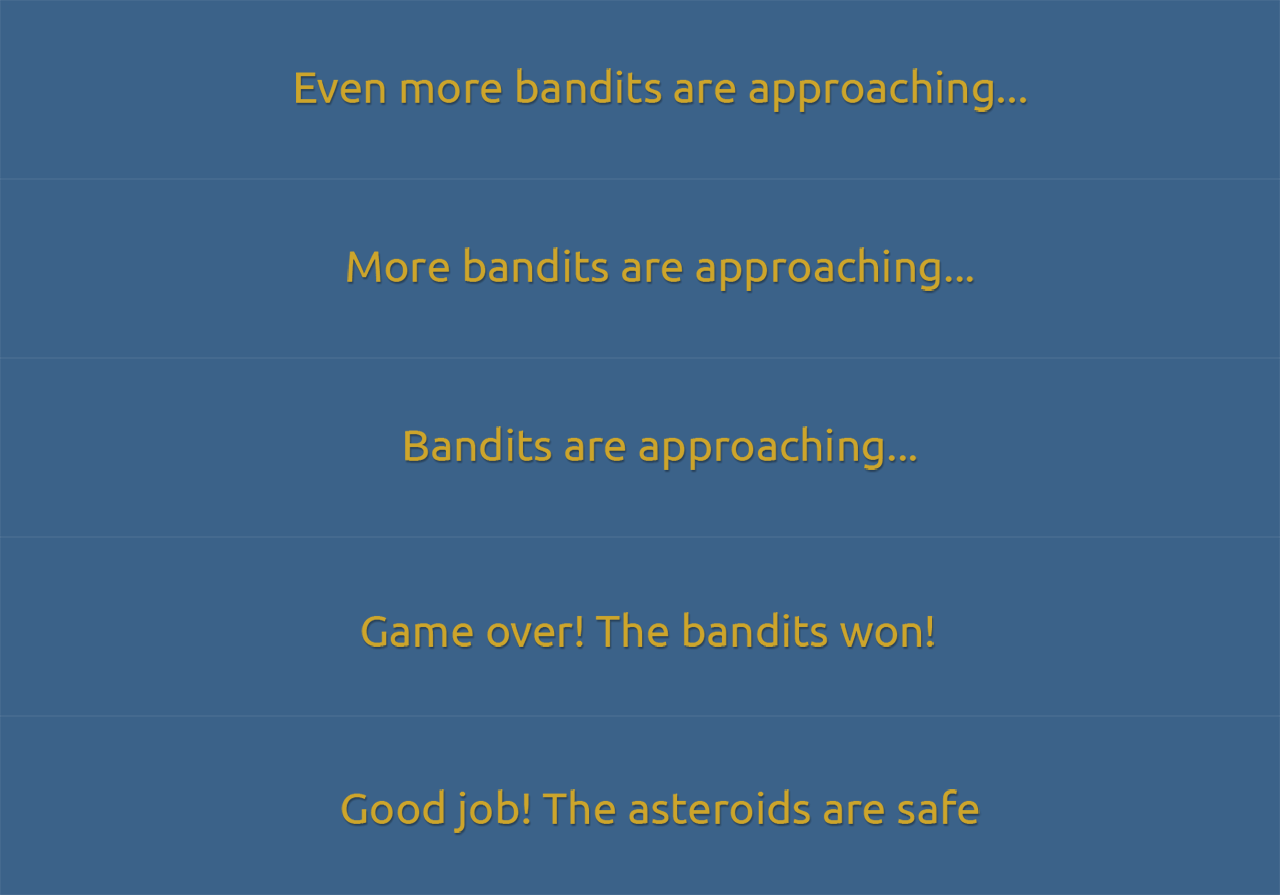
<style>
.page{position:relative;width:1280px;height:895px;background:#3b6289}
.page>*{position:absolute;margin:0}
.t1{font:44.1px "Ubuntu";color:#cda52b}
</style>
<div class="page">
<p class="t1" style="left:296px;top:68px;width:731px;height:44px">Even more bandits are approaching...</p>
<p class="t1" style="left:347px;top:247px;width:627px;height:44px">More bandits are approaching...</p>
<p class="t1" style="left:405px;top:426px;width:512px;height:44px">Bandits are approaching...</p>
<p class="t1" style="left:361px;top:612px;width:573px;height:35px">Game over! The bandits won!</p>
<p class="t1" style="left:341px;top:789px;width:639px;height:44px">Good job! The asteroids are safe</p>
</div>
